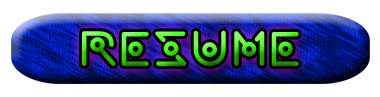
<style>
.page{position:relative;width:380px;height:97px;background:#ffffff}
.page>*{position:absolute;margin:0}
.t1{font:50px "wearealien!!"}
</style>
<div class="page">
<p class="t1" style="left:82px;top:30px;width:217px;height:36px">Resume</p>
</div>
